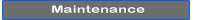
<style>
.page{position:relative;width:224px;height:20px;background:#6e6c6c}
.page>*{position:absolute;margin:0}
.t1{font:10.2px "ArialRoundedMTBold";color:#fcfcfc;scale:1.47 1}
</style>
<div class="page">
<p class="t1" style="left:52px;top:5px;width:93px;height:8px">Maintenance</p>
</div>
